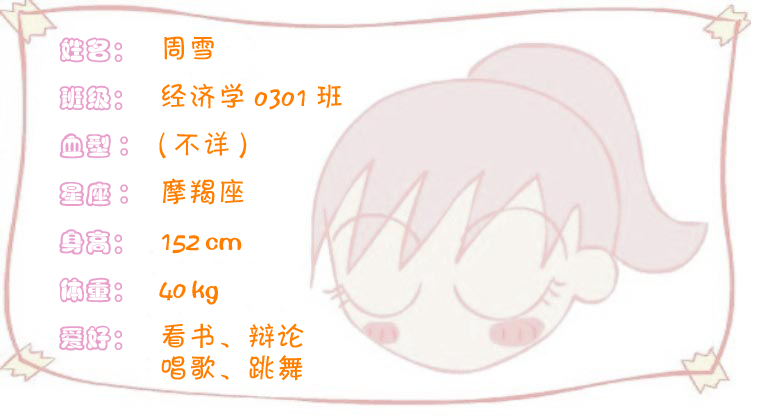
<style>
.page{position:relative;width:757px;height:418px;background:#ffffff}
.page>*{position:absolute;margin:0}
.t1{font:29.3px/48px "FZKATJW--GB1-0";color:#ff7e00}
.t2{font:29.3px/48px "FZSEJW--GB1-0";color:#ff7e00}
.t3{font:29.3px/32px "FZKATJW--GB1-0";color:#ff7e00}
</style>
<div class="page">
<p class="t1" style="left:159px;top:36px;width:183px;height:345px">周雪<br>经济学0301班<br>(不详)<br>摩羯座<br>152 <span class="t2">cm<br></span>40 <span class="t2">kg<br></span><span class="t3">看书、辩论<br>唱歌、跳舞</span></p>
</div>
